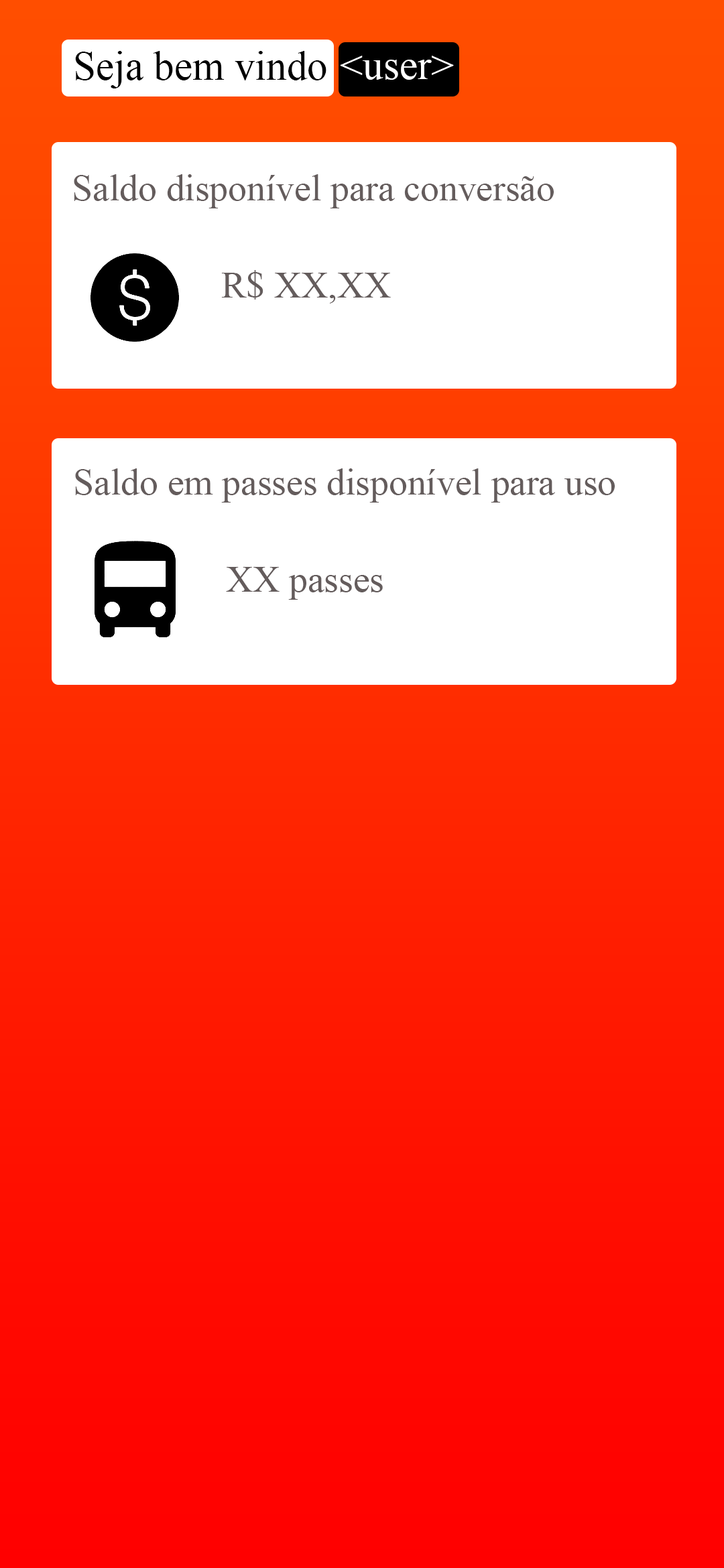
<style>
.page{position:relative;width:724px;height:1568px;background:#ffffff}
.page>*{position:absolute;margin:0}
.t1{font:40.9px "TimesNewRomanPSMT";color:#000000}
.t2{font:40.9px "TimesNewRomanPSMT";color:#ffffff}
.t3{font:37.2px "TimesNewRomanPSMT";color:#645c5c}
</style>
<div class="page">
<p class="t1" style="left:75px;top:51px;width:251px;height:37px">Seja bem vindo</p>
<p class="t2" style="left:340px;top:56px;width:114px;height:24px">&lt;user&gt;</p>
<p class="t3" style="left:74px;top:174px;width:479px;height:34px">Saldo disponível para conversão</p>
<p class="t3" style="left:221px;top:270px;width:170px;height:34px">R$ XX,XX</p>
<p class="t3" style="left:75px;top:468px;width:539px;height:35px">Saldo em passes disponível para uso</p>
<p class="t3" style="left:226px;top:567px;width:157px;height:33px">XX passes</p>
</div>
